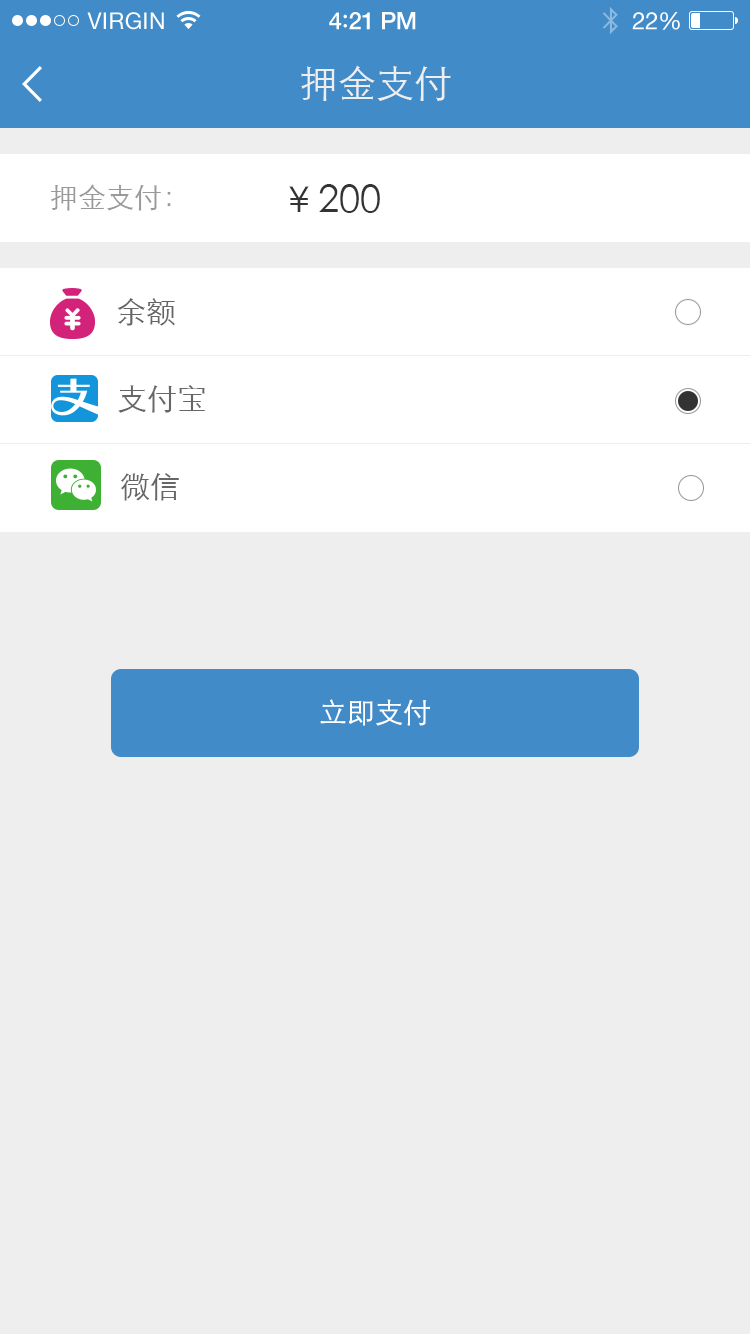
<style>
.page{position:relative;width:750px;height:1334px;background:#eeeeee}
.page>*{position:absolute;margin:0}
.t1{font:23px "HelveticaNeue";letter-spacing:0.02em;color:#ffffff}
.t2{font:24px "HelveticaNeue-Medium";letter-spacing:-0.02em;color:#ffffff}
.t3{font:26px "Avenir-Medium";letter-spacing:-0.02em;color:#ffffff}
.t4{font:24px "HelveticaNeue";letter-spacing:-0.02em;color:#ffffff}
.t5{font:38px "STXihei";color:#eeeeee}
.t6{font:28px "STXihei";color:#999999}
.t7{font:38px "STXihei";color:#333333}
.t8{font:30px "STXihei";color:#666666}
.t9{font:28px "STXihei";color:#ffffff}
</style>
<div class="page">
<p class="t1" style="left:87px;top:12px;width:77px;height:18px">VIRGIN</p>
<p class="t2" style="left:329px;top:12px;width:87px;height:18px">4<span class="t3">:</span>21 PM</p>
<p class="t4" style="left:632px;top:12px;width:48px;height:18px">22%</p>
<p class="t5" style="left:301px;top:65px;width:150px;height:36px">押金支付</p>
<p class="t6" style="left:51px;top:184px;width:120px;height:27px">押金支付：</p>
<p class="t7" style="left:289px;top:184px;width:91px;height:29px">￥200</p>
<p class="t8" style="left:117px;top:298px;width:58px;height:28px">余额</p>
<p class="t8" style="left:118px;top:385px;width:87px;height:28px">支付宝</p>
<p class="t8" style="left:120px;top:473px;width:59px;height:28px">微信</p>
<p class="t9" style="left:320px;top:699px;width:110px;height:27px">立即支付</p>
</div>
